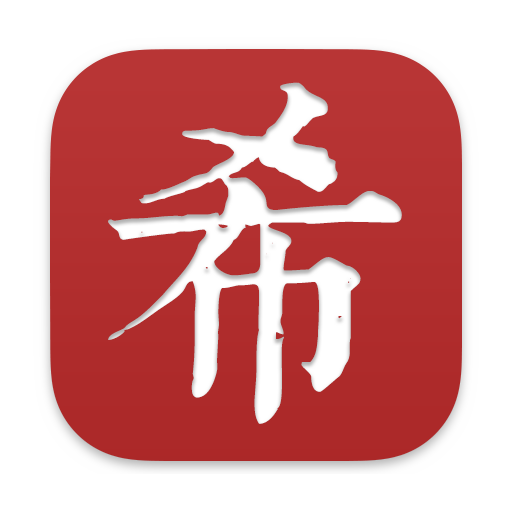
<style>
.page{position:relative;width:512px;height:512px;background:#ffffff}
.page>*{position:absolute;margin:0}
.t1{font:320px "TpldKhangXiDictDemo";color:#ffffff}
</style>
<div class="page">
<p class="t1" style="left:108px;top:82px;width:294px;height:342px">希</p>
</div>
